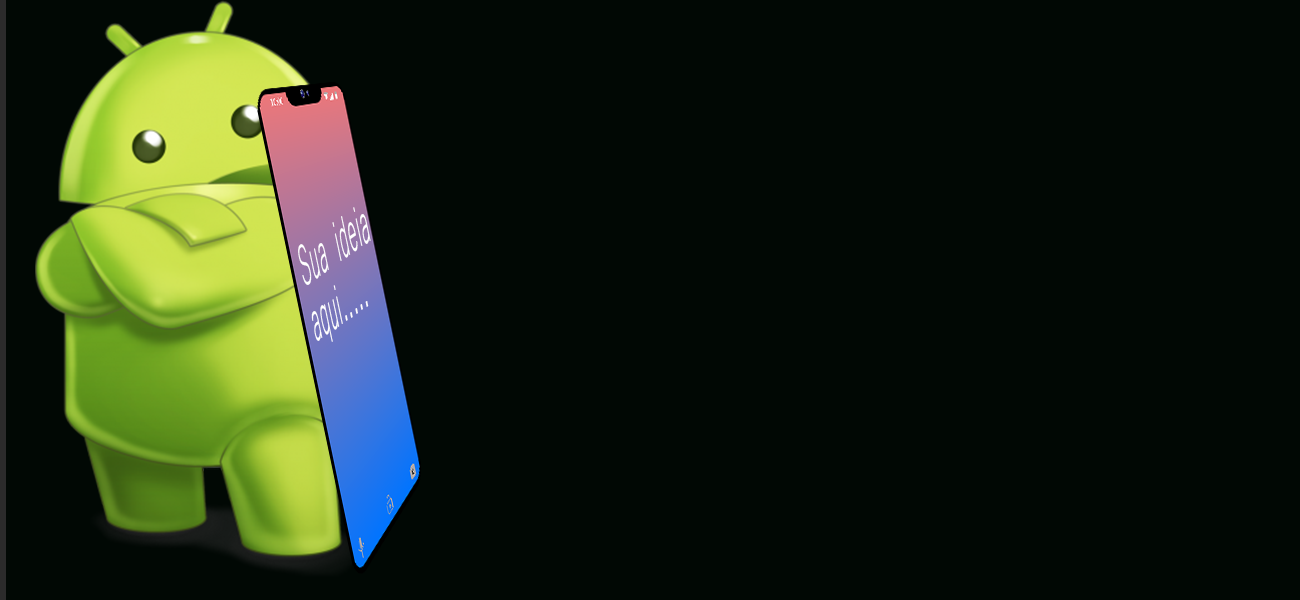
<style>
.page{position:relative;width:1300px;height:600px;background:#010804}
.page>*{position:absolute;margin:0}
.t1{font:73.6px/56.9px "Microsoft-Yi-Baiti";letter-spacing:0.04em;color:#ffffff;scale:0.3 1}
</style>
<div class="page">
<p class="t1" style="left:298px;top:207px;width:73px;height:135px;rotate:-35deg">Sua ideia<br>aqui.....</p>
</div>
